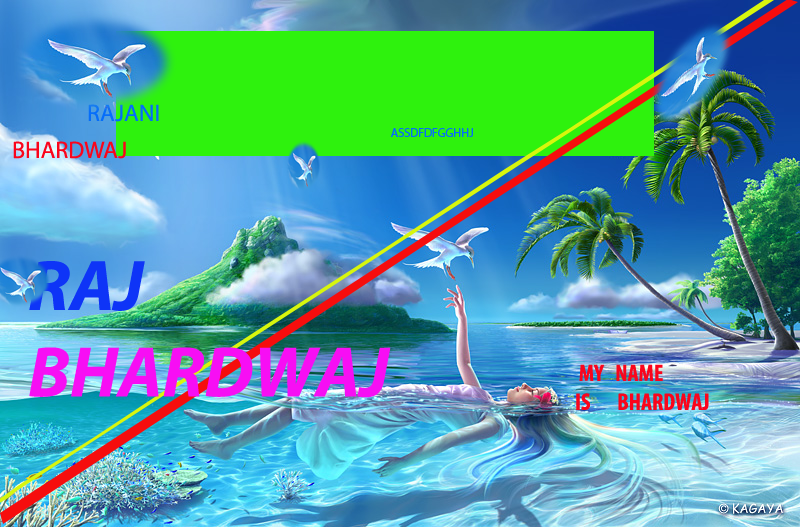
<style>
.page{position:relative;width:800px;height:527px}
.page>*{position:absolute;margin:0}
.t1{font:24px "MyriadPro-Regular";color:#056dfa}
.t2{font:12px "MyriadPro-Regular";color:#056dfa}
.t3{font:24px "MyriadPro-Regular";color:#fa051c}
.t4{font:72px "MyriadPro-BoldIt";color:#f70ef4}
.t5{font:72px "MyriadPro-BoldIt";color:#0e34f7}
.t6{font:24px "MyriadPro-BoldCond";color:#fa051c}
</style>
<div class="page">
<p class="t1" style="left:88px;top:104px;width:71px;height:18px">RAJANI</p>
<p class="t2" style="left:391px;top:128px;width:82px;height:9px">ASSDFDFGGHHJ</p>
<p class="t3" style="left:13px;top:141px;width:113px;height:18px">BHARDWAJ</p>
<p class="t4" style="left:29px;top:261px;width:362px;height:137px"><span class="t5">RAJ</span><br>BHARDWAJ</p>
<p class="t6" style="left:576px;top:364px;width:133px;height:46px">MY   NAME<br>IS       BHARDWAJ</p>
</div>
